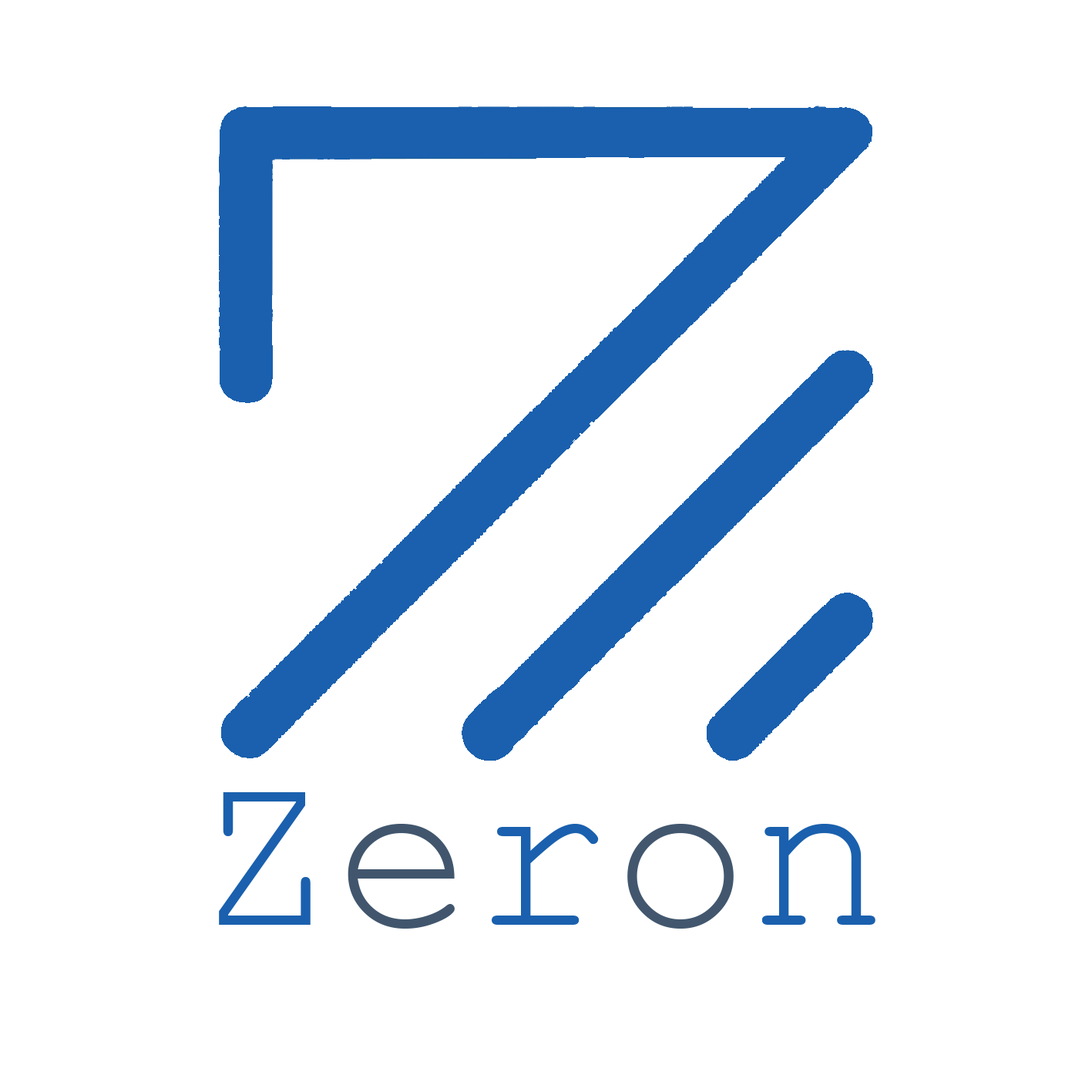
<style>
.page{position:relative;width:1092px;height:1092px;background:#ffffff}
.page>*{position:absolute;margin:0}
.t1{font:231.2px "CourierNewPSMT";color:#1a60ae}
.t2{font:231.2px "CourierNewPSMT";color:#41566d}
.t3{font:231.2px "CourierNewPSMT";color:#42576e}
</style>
<div class="page">
<p class="t1" style="left:219px;top:792px;width:656px;height:137px">Z<span class="t2">e</span>r<span class="t3">o</span>n</p>
</div>
